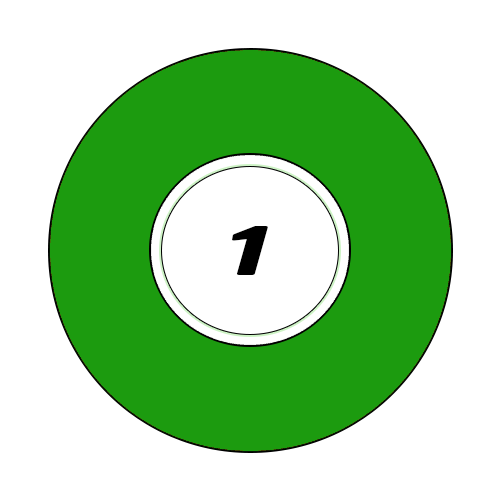
<style>
.page{position:relative;width:500px;height:500px;background:#ffffff}
.page>*{position:absolute;margin:0}
.t1{font:72px "BrandonGrotesque-BoldItalic";letter-spacing:0.007em;color:#000000;scale:2 1}
</style>
<div class="page">
<p class="t1" style="left:232px;top:226px;width:36px;height:49px">1</p>
</div>
